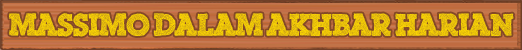
<style>
.page{position:relative;width:522px;height:50px}
.page>*{position:absolute;margin:0}
.t1{font:30px "ScribbleBoxDEMO";color:#f8d204}
</style>
<div class="page">
<p class="t1" style="left:9px;top:13px;width:505px;height:24px">Massimo dalam Akhbar Harian</p>
</div>
